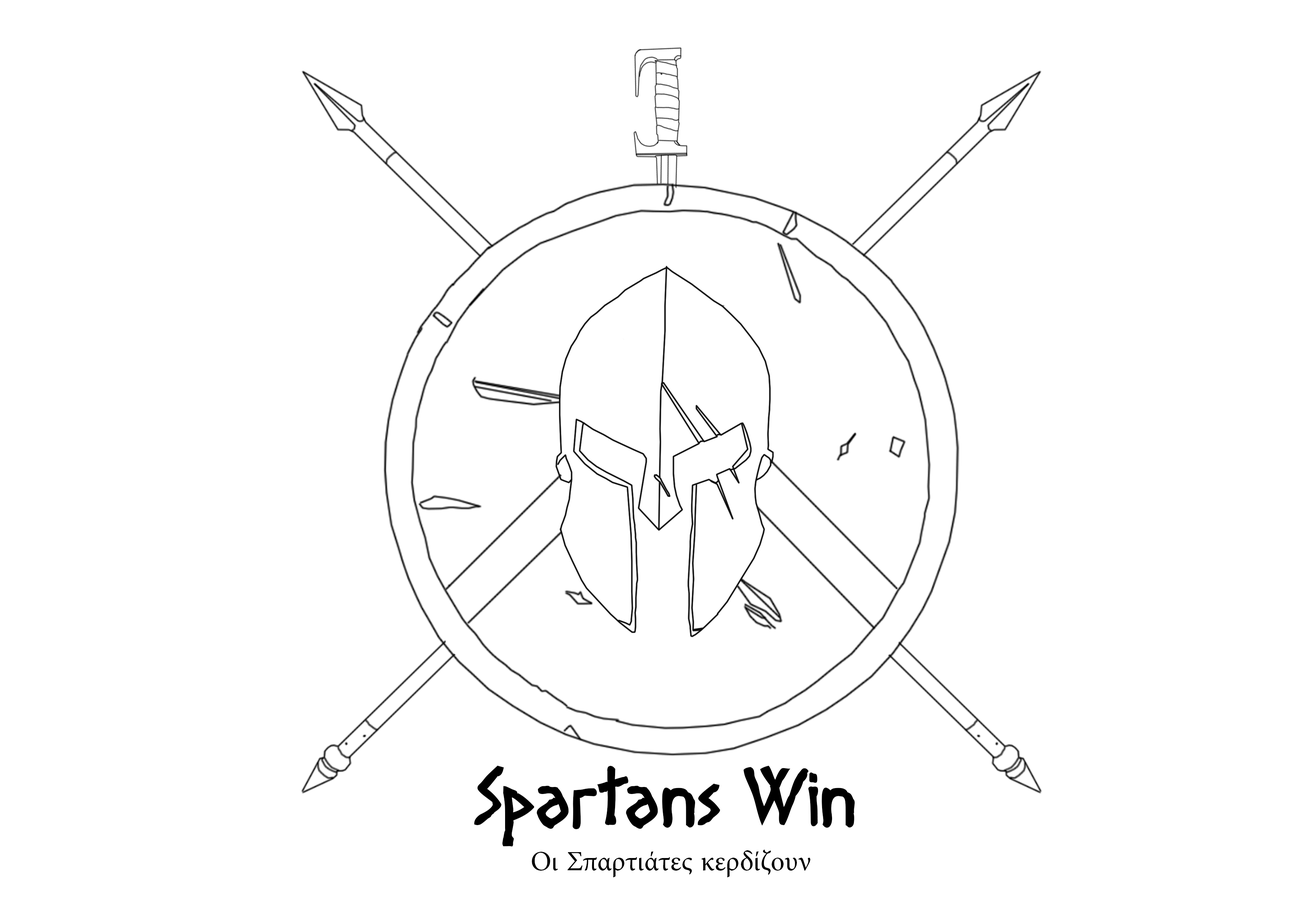
<style>
.page{position:relative;width:1299px;height:918px;background:#ffffff}
.page>*{position:absolute;margin:0}
.t1{font:74px "Diogenes";color:#000000}
.t2{font:27.8px "MinionPro-Regular";color:#000000}
</style>
<div class="page">
<p class="t1" style="left:474px;top:766px;width:380px;height:81px">Spartans Win</p>
<p class="t2" style="left:532px;top:850px;width:278px;height:27px">Οι Σπαρτιάτες κερδίζουν</p>
</div>
